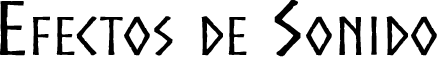
<style>
.page{position:relative;width:437px;height:57px;background:#ffffff}
.page>*{position:absolute;margin:0}
.t1{font:72px "Norse";color:#000000;font-variant:small-caps;font-weight:bold;scale:1.3 1}
</style>
<div class="page">
<p class="t1" style="left:0px;top:0px;width:437px;height:57px">Efectos de Sonido</p>
</div>
